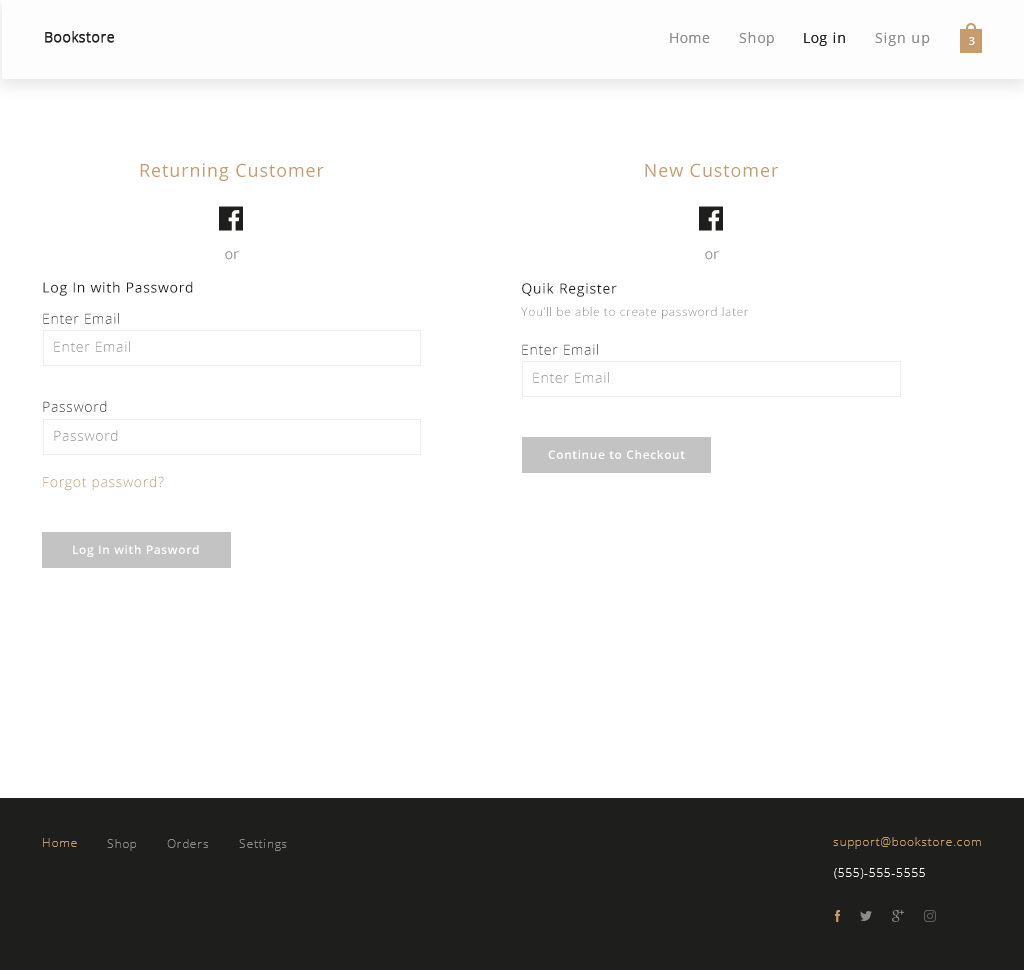
<style>
.page{position:relative;width:1024px;height:970px;background:#ffffff}
.page>*{position:absolute;margin:0}
.t1{font:18px "OpenSans";letter-spacing:0.05em;color:#c69c6d}
.t2{font:14px "OpenSans-Light";letter-spacing:0.05em;color:#8c8c8c}
.t3{font:14px "OpenSans";letter-spacing:0.05em;color:#1e1e1c}
.t4{font:14px "OpenSans-Light";letter-spacing:0.05em}
.t5{font:12px "OpenSans-Light";letter-spacing:0.05em;color:#8c8c8c}
.t6{font:12px "OpenSans-Semibold";letter-spacing:0.05em;color:#fffefe}
.t7{font:14px "OpenSans-Light";letter-spacing:0.05em;color:#c69c6d}
</style>
<div class="page">
<p class="t1" style="left:140px;top:163px;width:184px;height:18px">Returning Customer</p>
<p class="t1" style="left:645px;top:163px;width:133px;height:14px">New Customer</p>
<p class="t2" style="left:225px;top:251px;width:14px;height:9px">or</p>
<p class="t2" style="left:705px;top:251px;width:14px;height:9px">or</p>
<p class="t3" style="left:43px;top:281px;width:150px;height:15px">Log In with Password</p>
<p class="t3" style="left:522px;top:282px;width:95px;height:15px">Quik Register</p>
<p class="t4" style="left:43px;top:313px;width:76px;height:11px">Enter Email</p>
<p class="t5" style="left:521px;top:307px;width:228px;height:12px">You’ll be able to create password later</p>
<p class="t2" style="left:54px;top:341px;width:76px;height:11px">Enter Email</p>
<p class="t4" style="left:522px;top:344px;width:76px;height:11px">Enter Email</p>
<p class="t2" style="left:533px;top:372px;width:76px;height:11px">Enter Email</p>
<p class="t4" style="left:43px;top:401px;width:64px;height:11px">Password</p>
<p class="t2" style="left:54px;top:430px;width:64px;height:11px">Password</p>
<p class="t6" style="left:548px;top:450px;width:137px;height:9px">Continue to Checkout</p>
<p class="t7" style="left:43px;top:476px;width:121px;height:15px">Forgot password?</p>
<p class="t6" style="left:73px;top:545px;width:126px;height:12px">Log In with Pasword</p>
</div>
